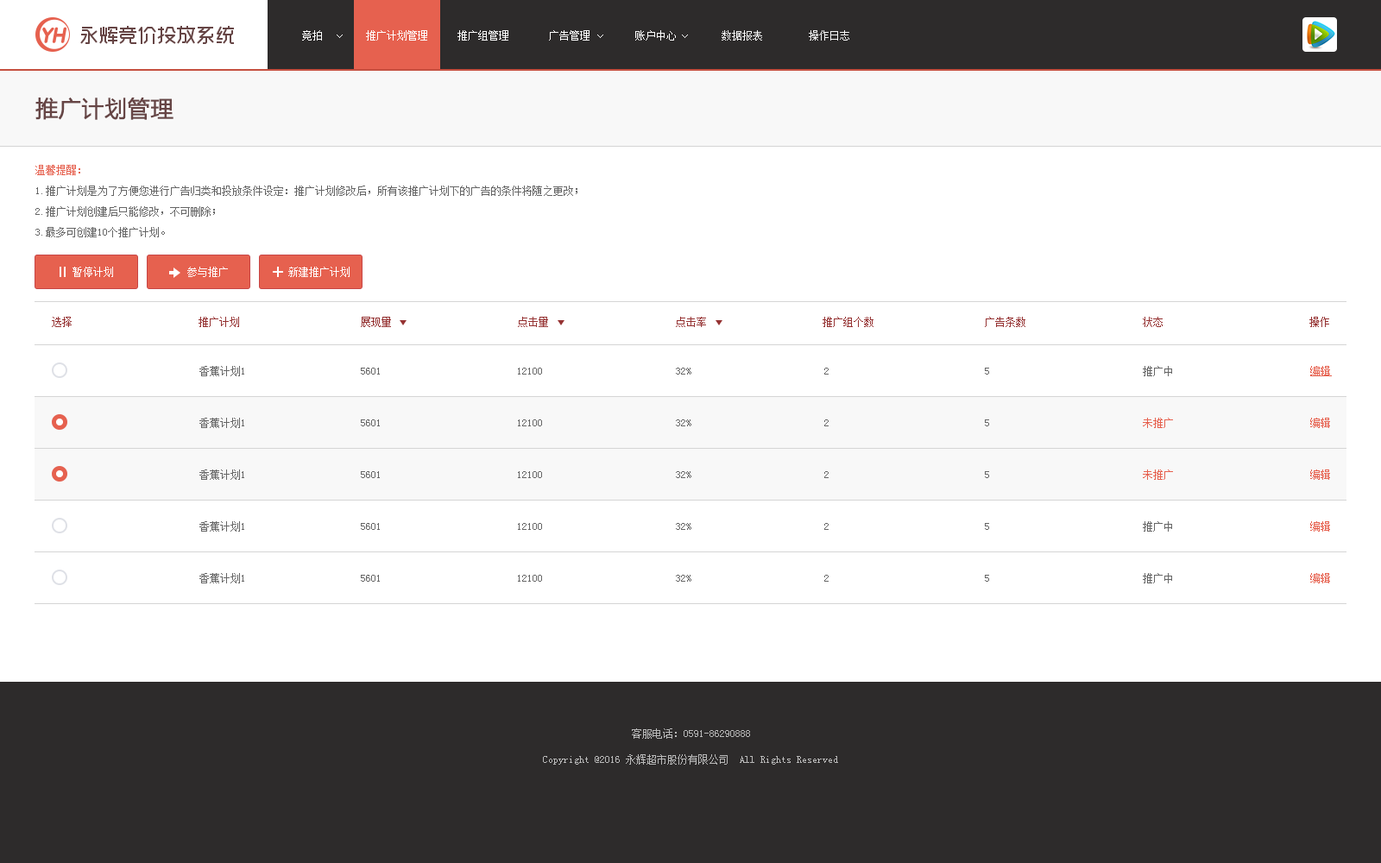
<style>
.page{position:relative;width:1381px;height:863px;background:#ffffff}
.page>*{position:absolute;margin:0}
.t1{font:10.4px "SimSun";color:#ffffff}
.t2{font:10.4px "SimSun";color:#f8f8f8}
.t3{font:22.4px "MicrosoftYaHei";color:#664545;font-weight:bold}
.t4{font:10.4px/20.7px "SimSun";color:#666666}
.t5{font:10.4px/20.7px "SimSun";color:#e6614f}
.t6{font:10.4px "SimSun";color:#953232}
.t7{font:10.4px "SimSun";color:#666666}
.t8{font:10.4px "SimSun";color:#e6614f;text-decoration:underline}
.t9{font:10.4px "SimSun";color:#e6614f}
.t10{font:10.4px "SimSun";color:#bababa}
</style>
<div class="page">
<p class="t1" style="left:302px;top:30px;width:20px;height:11px">竞拍</p>
<p class="t1" style="left:366px;top:30px;width:61px;height:11px">推广计划管理</p>
<p class="t1" style="left:458px;top:30px;width:50px;height:11px">推广组管理</p>
<p class="t1" style="left:549px;top:30px;width:41px;height:11px">广告管理</p>
<p class="t1" style="left:635px;top:30px;width:41px;height:11px">账户中心</p>
<p class="t2" style="left:722px;top:30px;width:40px;height:11px">数据报表</p>
<p class="t2" style="left:809px;top:30px;width:40px;height:11px">操作日志</p>
<p class="t3" style="left:35px;top:98px;width:139px;height:22px">推广计划管理</p>
<p class="t4" style="left:35px;top:165px;width:543px;height:72px"><span class="t5">温馨提醒：<br></span>1.推广计划是为了方便您进行广告归类和投放条件设定：推广计划修改后，所有该推广计划下的广告的条件将随之更改；<br>2.推广计划创建后只能修改，不可删除；<br>3.最多可创建10个推广计划。</p>
<p class="t1" style="left:73px;top:267px;width:40px;height:10px">暂停计划</p>
<p class="t1" style="left:187px;top:267px;width:41px;height:10px">参与推广</p>
<p class="t1" style="left:288px;top:267px;width:62px;height:10px">新建推广计划</p>
<p class="t6" style="left:52px;top:317px;width:20px;height:10px">选择</p>
<p class="t6" style="left:199px;top:317px;width:40px;height:10px">推广计划</p>
<p class="t6" style="left:361px;top:317px;width:30px;height:10px">展现量</p>
<p class="t6" style="left:518px;top:317px;width:30px;height:10px">点击量</p>
<p class="t6" style="left:676px;top:317px;width:30px;height:10px">点击率</p>
<p class="t6" style="left:823px;top:317px;width:51px;height:10px">推广组个数</p>
<p class="t6" style="left:985px;top:317px;width:41px;height:10px">广告条数</p>
<p class="t6" style="left:1143px;top:317px;width:20px;height:10px">状态</p>
<p class="t6" style="left:1310px;top:317px;width:19px;height:10px">操作</p>
<p class="t7" style="left:199px;top:366px;width:45px;height:10px">香蕉计划1</p>
<p class="t7" style="left:361px;top:368px;width:19px;height:7px">5601</p>
<p class="t7" style="left:518px;top:368px;width:24px;height:7px">12100</p>
<p class="t7" style="left:676px;top:368px;width:15px;height:7px">32%</p>
<p class="t7" style="left:824px;top:368px;width:5px;height:7px">2</p>
<p class="t7" style="left:985px;top:368px;width:4px;height:7px">5</p>
<p class="t7" style="left:1143px;top:366px;width:29px;height:10px">推广中</p>
<p class="t8" style="left:1310px;top:366px;width:22px;height:10px">编辑</p>
<p class="t7" style="left:199px;top:418px;width:45px;height:10px">香蕉计划1</p>
<p class="t7" style="left:361px;top:420px;width:19px;height:6px">5601</p>
<p class="t7" style="left:518px;top:420px;width:24px;height:6px">12100</p>
<p class="t7" style="left:676px;top:420px;width:15px;height:6px">32%</p>
<p class="t7" style="left:824px;top:420px;width:5px;height:6px">2</p>
<p class="t7" style="left:985px;top:420px;width:4px;height:6px">5</p>
<p class="t9" style="left:1143px;top:418px;width:30px;height:10px">未推广</p>
<p class="t9" style="left:1310px;top:418px;width:20px;height:10px">编辑</p>
<p class="t7" style="left:199px;top:470px;width:45px;height:10px">香蕉计划1</p>
<p class="t7" style="left:361px;top:471px;width:19px;height:7px">5601</p>
<p class="t7" style="left:518px;top:471px;width:24px;height:7px">12100</p>
<p class="t7" style="left:676px;top:471px;width:15px;height:7px">32%</p>
<p class="t7" style="left:824px;top:471px;width:5px;height:7px">2</p>
<p class="t7" style="left:985px;top:471px;width:4px;height:7px">5</p>
<p class="t9" style="left:1143px;top:470px;width:30px;height:10px">未推广</p>
<p class="t9" style="left:1310px;top:470px;width:20px;height:10px">编辑</p>
<p class="t7" style="left:199px;top:521px;width:45px;height:11px">香蕉计划1</p>
<p class="t7" style="left:1143px;top:521px;width:29px;height:11px">推广中</p>
<p class="t9" style="left:1310px;top:521px;width:20px;height:11px">编辑</p>
<p class="t7" style="left:361px;top:523px;width:19px;height:7px">5601</p>
<p class="t7" style="left:518px;top:523px;width:24px;height:7px">12100</p>
<p class="t7" style="left:676px;top:523px;width:15px;height:7px">32%</p>
<p class="t7" style="left:824px;top:523px;width:5px;height:7px">2</p>
<p class="t7" style="left:985px;top:523px;width:4px;height:7px">5</p>
<p class="t7" style="left:199px;top:573px;width:45px;height:11px">香蕉计划1</p>
<p class="t7" style="left:361px;top:575px;width:19px;height:7px">5601</p>
<p class="t7" style="left:518px;top:575px;width:24px;height:7px">12100</p>
<p class="t7" style="left:676px;top:575px;width:15px;height:7px">32%</p>
<p class="t7" style="left:824px;top:575px;width:5px;height:7px">2</p>
<p class="t7" style="left:985px;top:575px;width:4px;height:7px">5</p>
<p class="t7" style="left:1143px;top:573px;width:29px;height:11px">推广中</p>
<p class="t9" style="left:1310px;top:573px;width:20px;height:11px">编辑</p>
<p class="t10" style="left:632px;top:729px;width:118px;height:10px">客服电话：0591-86290888</p>
<p class="t10" style="left:543px;top:755px;width:295px;height:10px">Copyright @2016 永辉超市股份有限公司  All Rights Reserved</p>
</div>
